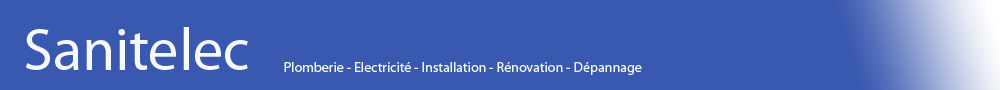
<style>
.page{position:relative;width:1000px;height:90px;background:#3958af}
.page>*{position:absolute;margin:0}
.t1{font:60px "MyriadPro-Regular";color:#f8f9fd}
.t2{font:14px "MyriadPro-Regular";color:#f8f9fd}
</style>
<div class="page">
<p class="t1" style="left:26px;top:27px;width:222px;height:43px">Sanitelec</p>
<p class="t2" style="left:284px;top:62px;width:358px;height:13px">Plomberie - Electricité - Installation - Rénovation - Dépannage</p>
</div>
